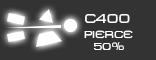
<style>
.page{position:relative;width:156px;height:60px;background:#333333}
.page>*{position:absolute;margin:0}
.t1{font:13px "MetroDF";color:#ffffff}
.t2{font:10.2px "MetroDF";color:#ffffff}
</style>
<div class="page">
<p class="t1" style="left:85px;top:14px;width:45px;height:9px">c400</p>
<p class="t2" style="left:84px;top:30px;width:49px;height:20px">PIERCE<br>  50%</p>
</div>
